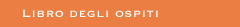
<style>
.page{position:relative;width:240px;height:27px;background:#eb7e43}
.page>*{position:absolute;margin:0}
.t1{font:14px "Copperplate";letter-spacing:0.05em;color:#ffffff}
</style>
<div class="page">
<p class="t1" style="left:22px;top:9px;width:136px;height:9px">Libro degli ospiti</p>
</div>
